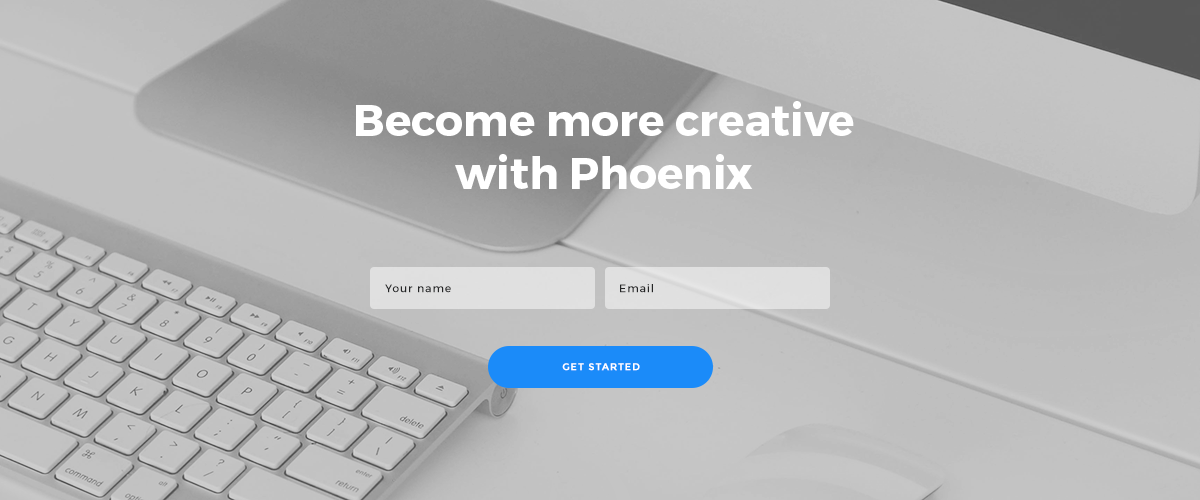
<style>
.page{position:relative;width:1200px;height:500px}
.page>*{position:absolute;margin:0}
.t1{font:44px "Montserrat-Bold";color:#ffffff}
.t2{font:11px "Montserrat-Regular";letter-spacing:0.08em;color:#242526}
.t3{font:10px "Montserrat-Bold";letter-spacing:0.08em;color:#ffffff;text-transform:uppercase}
</style>
<div class="page">
<p class="t1" style="left:356px;top:101px;width:498px;height:88px;text-align:center">Become more creative<br>with Phoenix</p>
<p class="t2" style="left:385px;top:284px;width:66px;height:9px">Your name</p>
<p class="t2" style="left:620px;top:284px;width:33px;height:9px">Email</p>
<p class="t3" style="left:562px;top:363px;width:78px;height:8px">get started</p>
</div>
